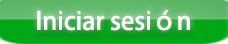
<style>
.page{position:relative;width:228px;height:44px}
.page>*{position:absolute;margin:0}
.t1{font:25px "AdobeHeitiStd-Regular";color:#ffffff}
</style>
<div class="page">
<p class="t1" style="left:37px;top:10px;width:153px;height:21px">Iniciar sesión</p>
</div>
